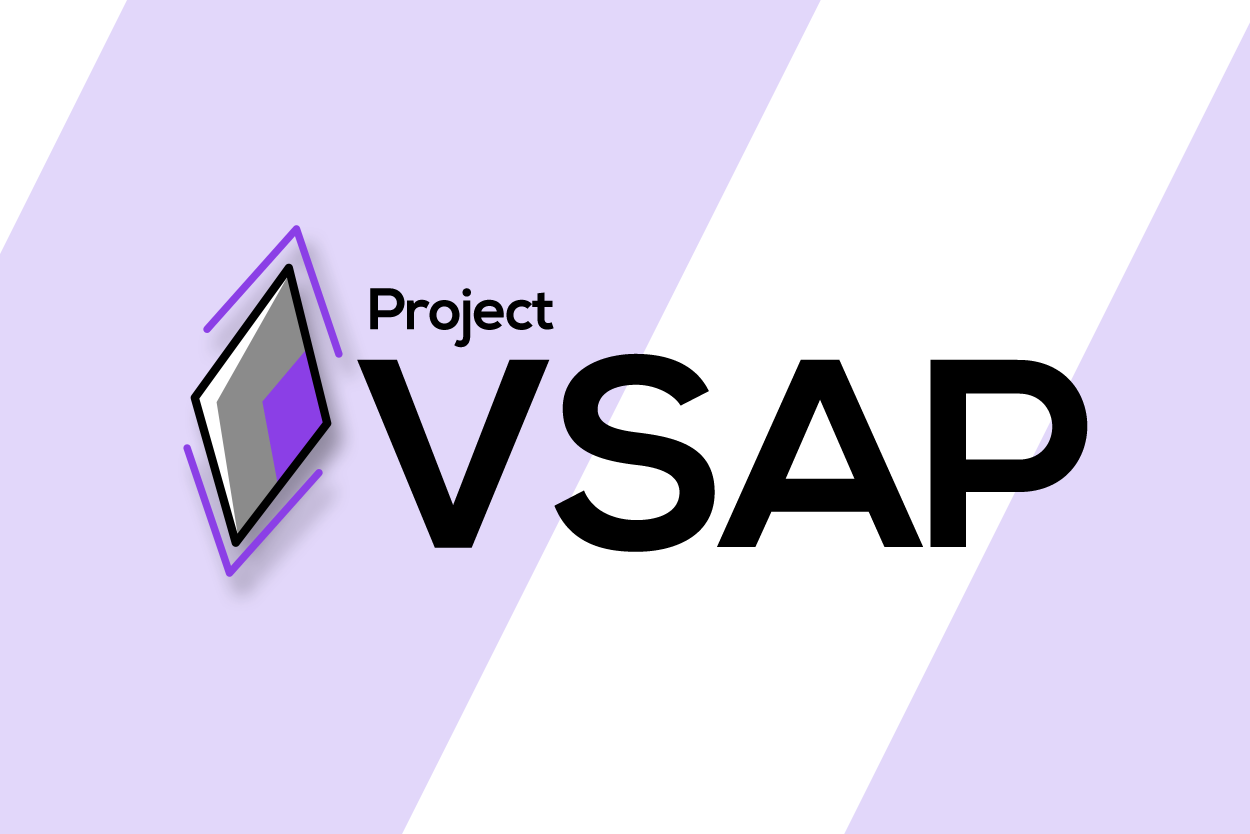
<style>
.page{position:relative;width:1250px;height:834px;background:#e2d7fa}
.page>*{position:absolute;margin:0}
.t1{font:58.3px "NexaBold";letter-spacing:-0.02em;color:#000000}
.t2{font:266.7px "NexaBold";letter-spacing:-0.02em;color:#000000}
</style>
<div class="page">
<p class="t1" style="left:370px;top:288px;width:184px;height:60px">Project</p>
<p class="t2" style="left:357px;top:353px;width:731px;height:199px">VSAP</p>
</div>
